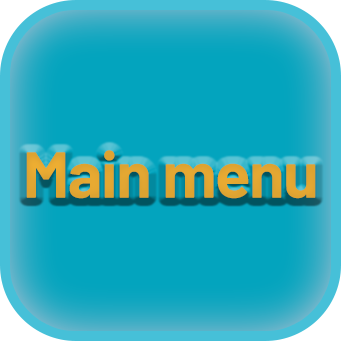
<style>
.page{position:relative;width:341px;height:341px;background:#03a4be}
.page>*{position:absolute;margin:0}
.t1{font:65px "Barlow-Bold";letter-spacing:-0.02em;color:#f7b432}
</style>
<div class="page">
<p class="t1" style="left:26px;top:150px;width:290px;height:49px">Main menu</p>
</div>
